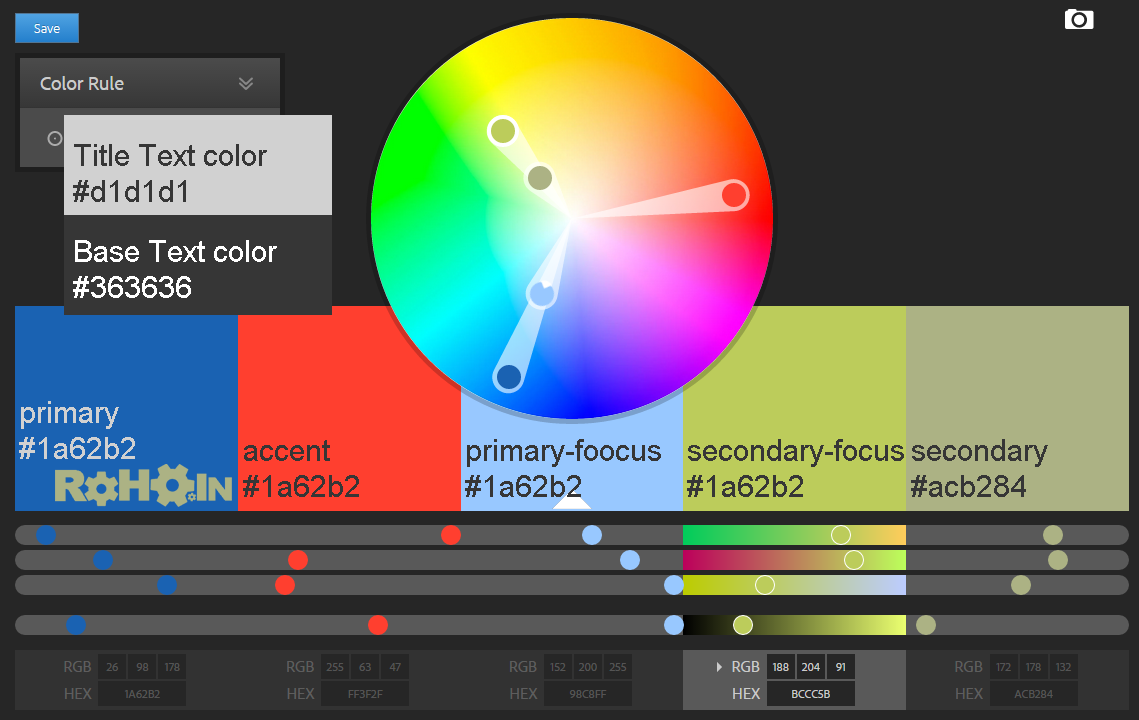
<style>
.page{position:relative;width:1139px;height:720px;background:#262626}
.page>*{position:absolute;margin:0}
.t1{font:30px "ArialMT";color:#363636}
.t2{font:30px "ArialMT";color:#ffffff}
.t3{font:30px "ArialMT";color:#d1d1d1}
</style>
<div class="page">
<p class="t1" style="left:73px;top:144px;width:194px;height:58px">Title Text color<br>#d1d1d1</p>
<p class="t2" style="left:73px;top:240px;width:204px;height:58px">Base Text color<br>#363636</p>
<p class="t3" style="left:19px;top:401px;width:116px;height:58px">primary<br>#1a62b2</p>
<p class="t1" style="left:243px;top:440px;width:116px;height:57px">accent<br>#1a62b2</p>
<p class="t1" style="left:465px;top:439px;width:196px;height:58px">primary-foocus<br>#1a62b2</p>
<p class="t1" style="left:687px;top:439px;width:217px;height:58px">secondary-focus<br>#1a62b2</p>
<p class="t1" style="left:911px;top:439px;width:137px;height:58px">secondary<br>#acb284</p>
</div>
